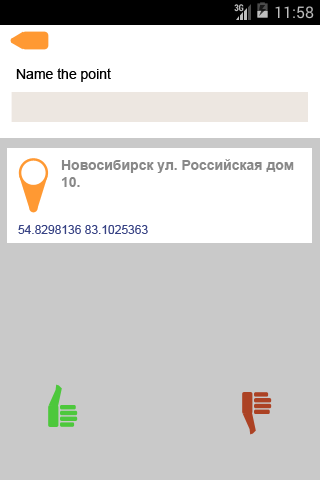
<style>
.page{position:relative;width:320px;height:480px;background:#c9c9c9}
.page>*{position:absolute;margin:0}
.t1{font:14px "ArialMT";color:#000000}
.t2{font:14px "Arial-BoldMT";color:#888888}
.t3{font:12px "ArialMT";color:#374284}
</style>
<div class="page">
<p class="t1" style="left:16px;top:68px;width:95px;height:14px">Name the point</p>
<p class="t2" style="left:61px;top:159px;width:233px;height:28px">Новосибирск ул. Российская дом <br>10.</p>
<p class="t3" style="left:18px;top:225px;width:130px;height:9px">54.8298136 83.1025363</p>
</div>
